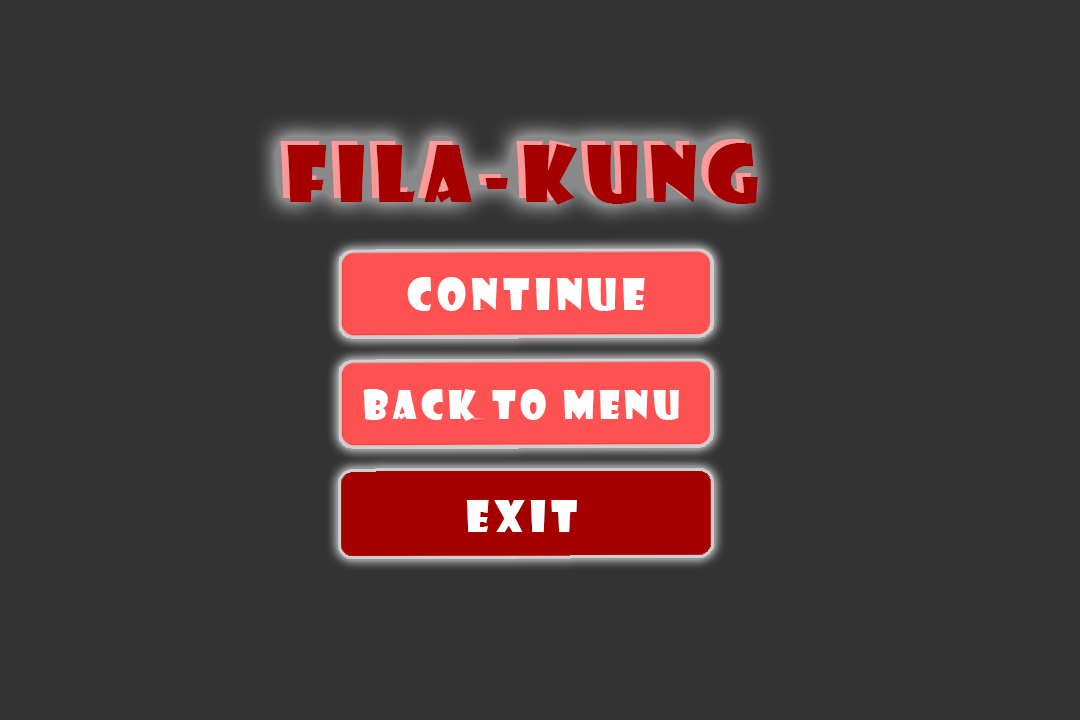
<style>
.page{position:relative;width:1080px;height:720px;background:#333333}
.page>*{position:absolute;margin:0}
.t1{font:75.7px "ShowcardGothic-Reg";letter-spacing:0.125em}
.t2{font:75.7px "ShowcardGothic-Reg";letter-spacing:0.125em;color:#a40000}
.t3{font:41.7px "ShowcardGothic-Reg";letter-spacing:0.125em;color:#ffffff}
.t4{font:37.5px "ShowcardGothic-Reg";letter-spacing:0.125em;color:#ffffff}
</style>
<div class="page">
<p class="t1" style="left:280px;top:139px;width:471px;height:62px">fila-kung</p>
<p class="t2" style="left:287px;top:143px;width:471px;height:62px">fila-kung</p>
<p class="t3" style="left:407px;top:277px;width:238px;height:34px">continue</p>
<p class="t4" style="left:363px;top:389px;width:316px;height:32px">back to menu</p>
<p class="t3" style="left:466px;top:500px;width:111px;height:32px">exit</p>
</div>
